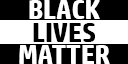
<style>
.page{position:relative;width:128px;height:64px;background:#ffffff}
.page>*{position:absolute;margin:0}
.t1{font:27.1px "HPSimplified-Bold";letter-spacing:-0.01em;color:#ffffff}
.t2{font:27.1px "HPSimplified-Bold";letter-spacing:-0.01em;color:#000000}
</style>
<div class="page">
<p class="t1" style="left:29px;top:0px;width:71px;height:19px">BLACK</p>
<p class="t2" style="left:33px;top:23px;width:62px;height:19px">LIVES</p>
<p class="t1" style="left:19px;top:45px;width:91px;height:19px">MATTER</p>
</div>
